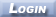
<style>
.page{position:relative;width:56px;height:17px}
.page>*{position:absolute;margin:0}
.t1{font:14px "Arial-Black";color:#ffffff;font-variant:small-caps;font-style:italic}
</style>
<div class="page">
<p class="t1" style="left:9px;top:3px;width:37px;height:10px">Login</p>
</div>
